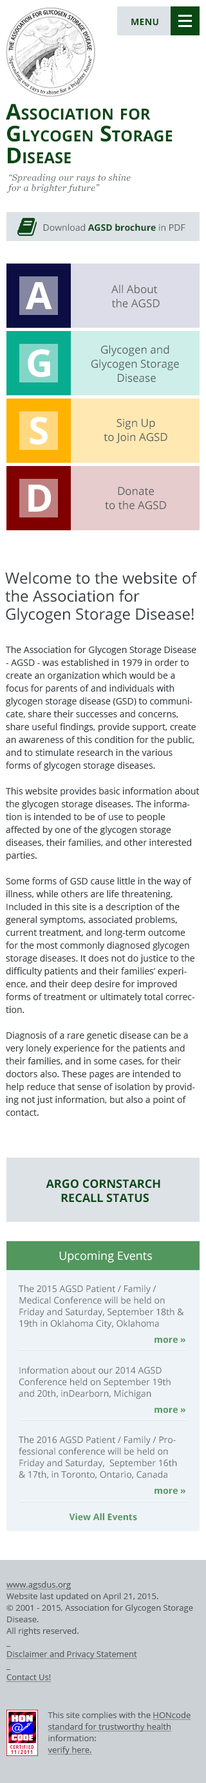
<style>
.page{position:relative;width:206px;height:1783px;background:#ffffff}
.page>*{position:absolute;margin:0}
.t1{font:9px "OpenSans-Bold";letter-spacing:0.025em;color:#0a4815;text-transform:uppercase}
.t2{font:21.9px/21.9px "OpenSans-Bold";color:#0a4815;font-variant:small-caps}
.t3{font:9px/10.3px "Georgia-Italic";letter-spacing:0.025em;color:#696d71}
.t4{font:9px "OpenSans-Bold";color:#0a4815}
.t5{font:9px "OpenSans";color:#575b60}
.t6{font:37.7px "OpenSans-Bold";color:#ffffff}
.t7{font:10.9px/14.1px "OpenSans";color:#666666}
.t8{font:10.9px/14.1px "OpenSans";color:#5a5f63}
.t9{font:15.4px/18px "OpenSans";color:#33383d}
.t10{font:9px/12.9px "OpenSans";color:#33383d}
.t11{font:11.6px/14.1px "OpenSans-Bold";color:#0a4815}
.t12{font:11.6px "OpenSans";color:#ffffff}
.t13{font:9px/11.6px "OpenSans";color:#666b70}
.t14{font:9px "OpenSans-Bold";color:#52975e}
.t15{font:8.4px/11.6px "OpenSans";color:#565a60}
.t16{font:8.4px/11.6px "OpenSans";color:#565a60;text-decoration:underline}
</style>
<div class="page">
<p class="t1" style="left:131px;top:19px;width:27px;height:7px">Menu</p>
<p class="t2" style="left:6px;top:104px;width:166px;height:60px">Association for <br>Glycogen Storage <br>Disease</p>
<p class="t3" style="left:6px;top:174px;width:124px;height:19px">“Spreading our rays to shine <br>for a brighter future”</p>
<p class="t4" style="left:43px;top:224px;width:142px;height:7px"><span class="t5">Download </span>AGSD brochure <span class="t5">in PDF</span></p>
<p class="t6" style="left:26px;top:282px;width:26px;height:27px">A</p>
<p class="t7" style="left:111px;top:285px;width:48px;height:23px;text-align:center">All About <br>the AGSD</p>
<p class="t6" style="left:28px;top:349px;width:22px;height:28px">G</p>
<p class="t8" style="left:91px;top:345px;width:88px;height:37px;text-align:center">Glycogen and <br>Glycogen Storage <br>Disease</p>
<p class="t6" style="left:30px;top:417px;width:18px;height:28px">S</p>
<p class="t8" style="left:104px;top:419px;width:63px;height:25px;text-align:center">Sign Up<br>to Join AGSD</p>
<p class="t6" style="left:28px;top:485px;width:23px;height:27px">D</p>
<p class="t8" style="left:105px;top:487px;width:61px;height:23px;text-align:center">Donate<br>to the AGSD</p>
<p class="t9" style="left:5px;top:572px;width:192px;height:52px">Welcome to the website of the Association for Glycogen Storage Disease!</p>
<p class="t10" style="left:6px;top:646px;width:193px;height:470px">The Association for Glycogen Storage Disease - AGSD - was established in 1979 in order to create an organization which would be a focus for parents of and individuals with glycogen storage disease (GSD) to communicate, share their successes and concerns, share useful findings, provide support, create an awareness of this condition for the public, and to stimulate research in the various forms of glycogen storage diseases.<br> <br>This website provides basic information about the glycogen storage diseases. The information is intended to be of use to people affected by one of the glycogen storage diseases, their families, and other interested parties.<br> <br>Some forms of GSD cause little in the way of illness, while others are life threatening. Included in this site is a description of the general symptoms, associated problems, current treatment, and long-term outcome for the most commonly diagnosed glycogen storage diseases. It does not do justice to the difficulty patients and their families’ experience, and their deep desire for improved forms of treatment or ultimately total correction.<br> <br>Diagnosis of a rare genetic disease can be a very lonely experience for the patients and their families, and in some cases, for their doctors also. These pages are intended to help reduce that sense of isolation by providing not just information, but also a point of contact.</p>
<p class="t11" style="left:46px;top:1180px;width:114px;height:23px;text-align:center">ARGO CORNSTARCH <br>RECALL STATUS</p>
<p class="t12" style="left:59px;top:1251px;width:93px;height:12px">Upcoming Events</p>
<p class="t13" style="left:19px;top:1285px;width:165px;height:44px">The 2015 AGSD Patient / Family / Medical Conference will be held on Friday and Saturday, September 18th &amp; 19th in Oklahoma City, Oklahoma</p>
<p class="t14" style="left:154px;top:1338px;width:31px;height:6px">more »</p>
<p class="t13" style="left:19px;top:1367px;width:151px;height:33px">Information about our 2014 AGSD Conference held on September 19th and 20th, inDearborn, Michigan</p>
<p class="t14" style="left:154px;top:1408px;width:31px;height:6px">more »</p>
<p class="t13" style="left:19px;top:1436px;width:158px;height:43px">The 2016 AGSD Patient / Family / Professional conference will be held on Friday and Saturday,  September 16th &amp; 17th, in Toronto, Ontario, Canada</p>
<p class="t14" style="left:154px;top:1489px;width:31px;height:6px">more »</p>
<p class="t14" style="left:69px;top:1513px;width:68px;height:8px">View All Events</p>
<p class="t15" style="left:6px;top:1581px;width:187px;height:101px"><span class="t16">www.agsdus.org</span><br>Website last updated on April 21, 2015.<br>© 2001 - 2015, Association for Glycogen Storage Disease.<br>All rights reserved.<br>_<br><span class="t16">Disclaimer and Privacy Statement     <br></span>_<br><span class="t16">Contact Us!</span></p>
<p class="t16" style="left:48px;top:1712px;width:143px;height:43px"><span class="t15">This site complies with the </span>HONcode standard for trustworthy health<span class="t15"> information:<br></span>verify here.</p>
</div>
